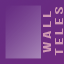
<style>
.page{position:relative;width:64px;height:64px}
.page>*{position:absolute;margin:0}
.t1{font:10.4px "BebasNeue";color:#cf98b3;scale:1.89 1}
</style>
<div class="page">
<p class="t1" style="left:43px;top:7px;width:20px;height:49px;text-align:center;rotate:-90deg">W A L L <br>T E L E S</p>
</div>
